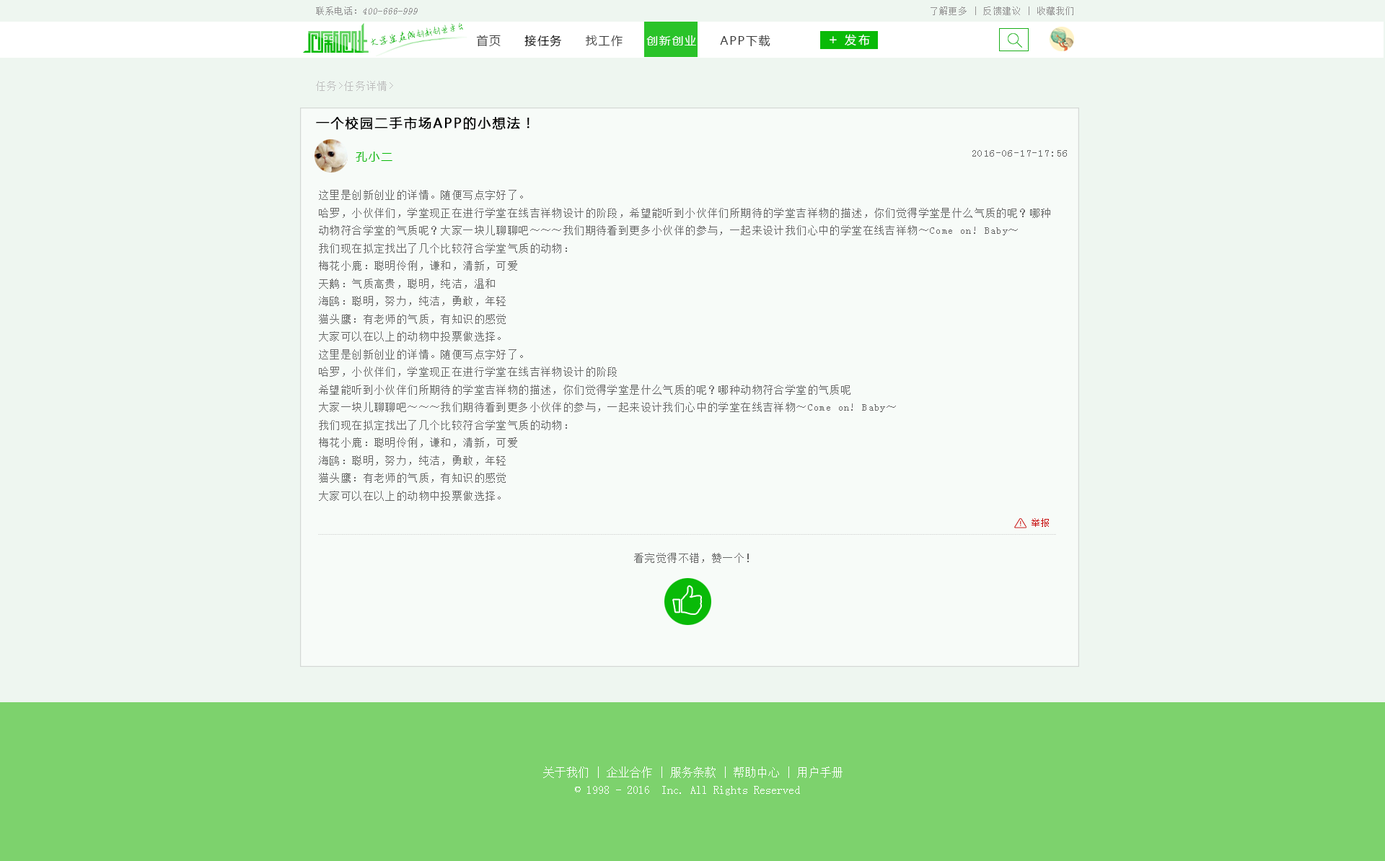
<style>
.page{position:relative;width:1385px;height:861px;background:#eef6f0}
.page>*{position:absolute;margin:0}
.t1{font:9.6px "SimSun";color:#959595;font-style:italic}
.t2{font:9.6px "SimSun";color:#959595}
.t3{font:8.7px "SimSun";letter-spacing:0.1em;color:#959494}
.t4{font:8.9px "AnJingCheng-Xing-2.0";letter-spacing:-0.01em;color:#09ba08}
.t5{font:10px "AnJingCheng-Xing-2.0";letter-spacing:-0.01em;color:#09ba08}
.t6{font:11.5px "MicrosoftYaHei";letter-spacing:0.1em;color:#3e3e3e}
.t7{font:11.5px "MicrosoftYaHei";letter-spacing:0.1em;color:#000000}
.t8{font:11.5px "MicrosoftYaHei";letter-spacing:0.1em;color:#ffffff}
.t9{font:13.5px "MicrosoftYaHei";letter-spacing:0.2em;color:#ffffff}
.t10{font:11.5px "MicrosoftYaHei";letter-spacing:0.2em;color:#ffffff}
.t11{font:10.1px "SimSun";letter-spacing:0.1em;color:#bebebe}
.t12{font:13px "MicrosoftYaHei";letter-spacing:0.1em;color:#000000;font-weight:bold}
.t13{font:11.5px "MicrosoftYaHei";letter-spacing:0.1em;color:#09ba08}
.t14{font:10.1px "SimSun";letter-spacing:0.1em;color:#676867}
.t15{font:9.6px "SimSun";color:#c70d0d}
.t16{font:11.5px/17.3px "SimSun";color:#ffffff}
</style>
<div class="page">
<p class="t1" style="left:316px;top:6px;width:102px;height:9px"><span class="t2">联系电话：</span>400-666-999</p>
<p class="t3" style="left:931px;top:6px;width:143px;height:9px">了解更多 | 反馈建议 | 收藏我们</p>
<p class="t4" style="left:371px;top:22px;width:93px;height:23px;rotate:-10deg"><span class="t5">大学生在线</span>创新创业平台</p>
<p class="t6" style="left:476px;top:35px;width:295px;height:12px">首页    <span class="t7"> 接任务 </span>    找工作     <span class="t8">创新创业  </span>   APP下载</p>
<p class="t9" style="left:830px;top:36px;width:7px;height:7px">+</p>
<p class="t10" style="left:845px;top:34px;width:25px;height:11px">发布</p>
<p class="t11" style="left:316px;top:81px;width:77px;height:10px">任务&gt;任务详情&gt;</p>
<p class="t12" style="left:316px;top:117px;width:214px;height:13px">一个校园二手市场APP的小想法！</p>
<p class="t13" style="left:356px;top:152px;width:37px;height:10px">孔小二</p>
<p class="t14" style="left:973px;top:150px;width:94px;height:7px">2016-06-17-17:56</p>
<p class="t14" style="left:319px;top:190px;width:732px;height:311px">这里是创新创业的详情。随便写点字好了。<br>哈罗，小伙伴们，学堂现正在进行学堂在线吉祥物设计的阶段，希望能听到小伙伴们所期待的学堂吉祥物的描述，你们觉得学堂是什么气质的呢？哪种动物符合学堂的气质呢？大家一块儿聊聊吧～～～我们期待看到更多小伙伴的参与，一起来设计我们心中的学堂在线吉祥物～Come on! Baby～<br>我们现在拟定找出了几个比较符合学堂气质的动物：<br>梅花小鹿：聪明伶俐，谦和，清新，可爱<br>天鹅：气质高贵，聪明，纯洁，温和<br>海鸥：聪明，努力，纯洁，勇敢，年轻<br>猫头鹰：有老师的气质，有知识的感觉<br>大家可以在以上的动物中投票做选择。<br>这里是创新创业的详情。随便写点字好了。<br>哈罗，小伙伴们，学堂现正在进行学堂在线吉祥物设计的阶段<br>希望能听到小伙伴们所期待的学堂吉祥物的描述，你们觉得学堂是什么气质的呢？哪种动物符合学堂的气质呢<br>大家一块儿聊聊吧～～～我们期待看到更多小伙伴的参与，一起来设计我们心中的学堂在线吉祥物～Come on! Baby～<br>我们现在拟定找出了几个比较符合学堂气质的动物：<br>梅花小鹿：聪明伶俐，谦和，清新，可爱<br>海鸥：聪明，努力，纯洁，勇敢，年轻<br>猫头鹰：有老师的气质，有知识的感觉<br>大家可以在以上的动物中投票做选择。</p>
<p class="t15" style="left:1032px;top:518px;width:17px;height:9px">举报</p>
<p class="t14" style="left:634px;top:553px;width:115px;height:10px">看完觉得不错，赞一个！</p>
<p class="t16" style="left:543px;top:766px;width:300px;height:29px;text-align:center">关于我们 | 企业合作 | 服务条款 | 帮助中心 | 用户手册<br>© 1998 - 2016  Inc. All Rights Reserved</p>
</div>
